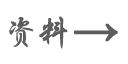
<style>
.page{position:relative;width:128px;height:64px;background:#ffffff}
.page>*{position:absolute;margin:0}
.t1{font:33.3px "STXingkai";color:#5d5d5d}
.t2{font:45.8px "TimesNewRomanPS-BoldMT";color:#5d5d5d;font-weight:bold}
</style>
<div class="page">
<p class="t1" style="left:9px;top:16px;width:59px;height:33px">资料</p>
<p class="t2" style="left:74px;top:23px;width:44px;height:19px">→</p>
</div>
